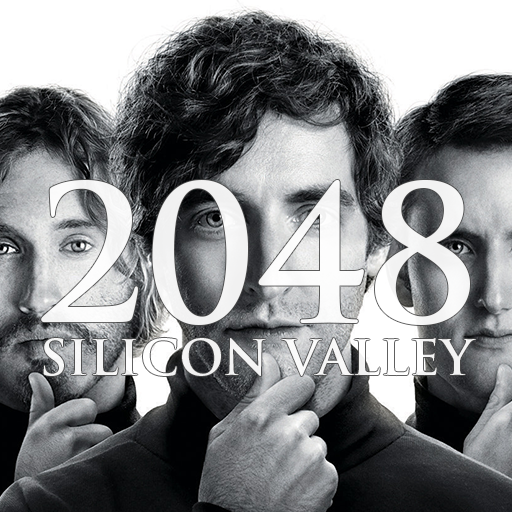
<style>
.page{position:relative;width:512px;height:512px}
.page>*{position:absolute;margin:0}
.t1{font:184.7px "TrajanPro-Bold";color:#ffffff}
.t2{font:48.6px "TrajanPro-Bold";color:#ffffff}
</style>
<div class="page">
<p class="t1" style="left:41px;top:180px;width:429px;height:145px;opacity:0.91">2048</p>
<p class="t2" style="left:43px;top:338px;width:433px;height:38px;opacity:0.91">SILICON VALLEY</p>
</div>
